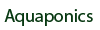
<style>
.page{position:relative;width:100px;height:30px;background:#ffffff}
.page>*{position:absolute;margin:0}
.t1{font:18px "MyriadPro-Regular";color:#083912}
</style>
<div class="page">
<p class="t1" style="left:4px;top:9px;width:89px;height:17px">Aquaponics</p>
</div>
